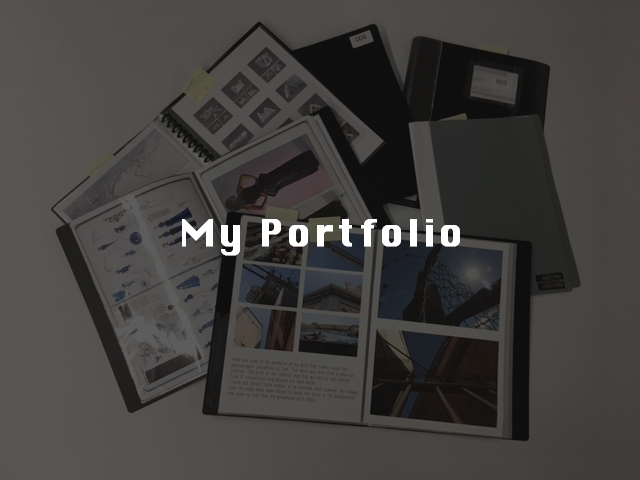
<style>
.page{position:relative;width:640px;height:480px}
.page>*{position:absolute;margin:0}
.t1{font:36px "Silom";letter-spacing:0.075em;color:#ffffff;font-weight:bold}
</style>
<div class="page">
<p class="t1" style="left:182px;top:219px;width:278px;height:37px">My Portfolio</p>
</div>
